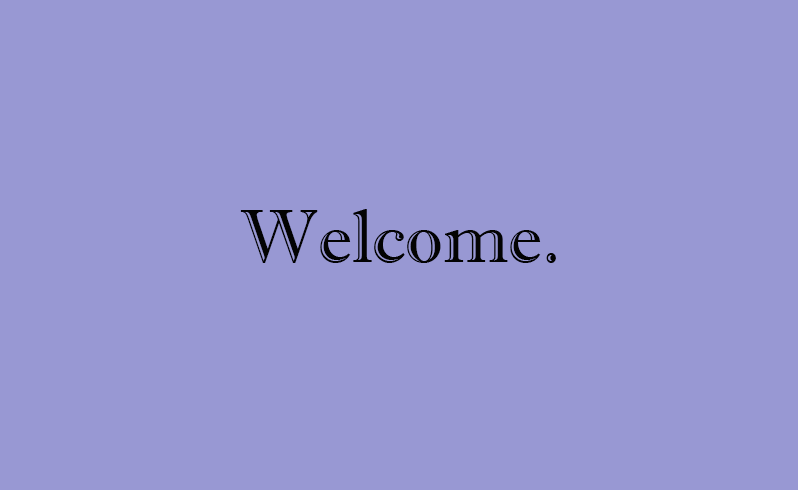
<style>
.page{position:relative;width:798px;height:490px;background:#9898d3}
.page>*{position:absolute;margin:0}
.t1{font:74.8px "ImprintMT-Shadow";color:#030303}
</style>
<div class="page">
<p class="t1" style="left:240px;top:209px;width:316px;height:54px">Welcome.</p>
</div>
